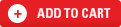
<style>
.page{position:relative;width:121px;height:27px;background:#e61f25}
.page>*{position:absolute;margin:0}
.t1{font:16px "Univers-CondensedBold";color:#e61f25}
.t2{font:13px "Univers-CondensedBold";color:#fceeee}
</style>
<div class="page">
<p class="t1" style="left:14px;top:10px;width:8px;height:8px">+</p>
<p class="t2" style="left:37px;top:8px;width:74px;height:10px">ADD TO CART</p>
</div>
